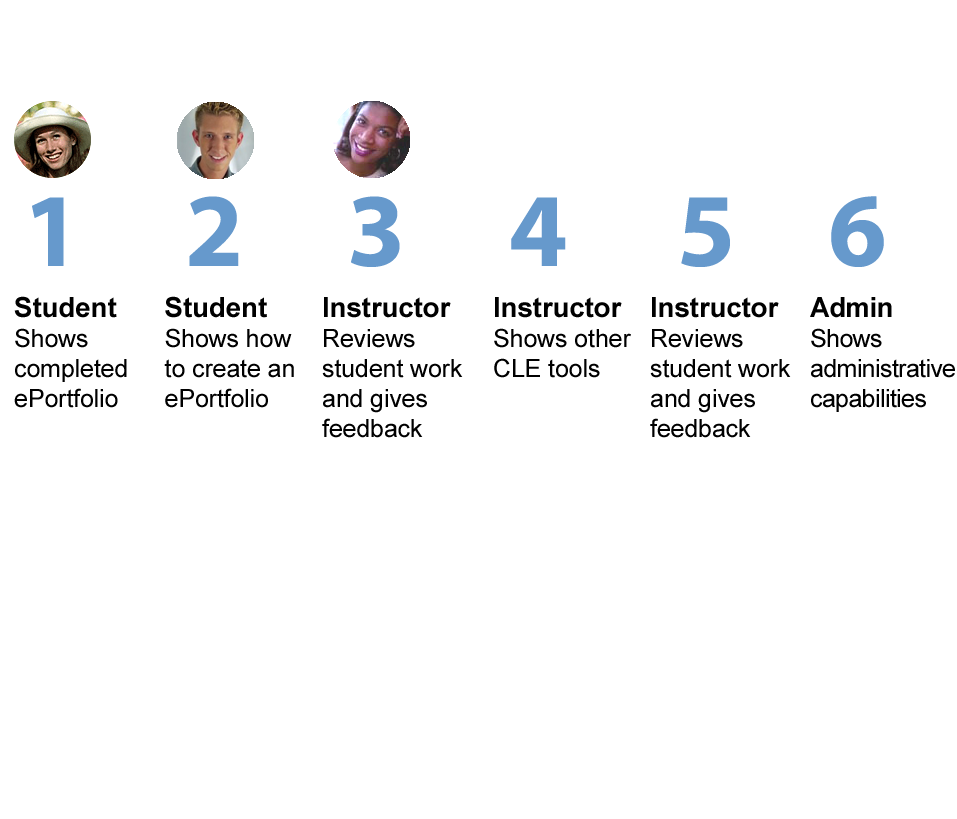
<style>
.page{position:relative;width:957px;height:819px;background:#ffffff}
.page>*{position:absolute;margin:0}
.t1{font:105.6px "Myriad-Bold";letter-spacing:0.39em;color:#6699cc}
.t2{font:25px "ArialMT";letter-spacing:-0.005em;color:#000000}
.t3{font:27.8px "Arial-BoldMT";letter-spacing:-0.005em;color:#000000}
.t4{font:25px "ArialMT";letter-spacing:-0.025em;color:#000000}
.t5{font:27.8px "Arial-BoldMT";letter-spacing:-0.025em;color:#000000}
</style>
<div class="page">
<p class="t1" style="left:32px;top:196px;width:852px;height:71px">1 2 3 4 5 6</p>
<p class="t2" style="left:14px;top:296px;width:113px;height:112px"><span class="t3">Student<br></span>Shows completed ePortfolio</p>
<p class="t2" style="left:164px;top:296px;width:130px;height:112px"><span class="t3">Student<br></span>Shows how to create an ePortfolio</p>
<p class="t2" style="left:322px;top:297px;width:141px;height:141px"><span class="t3">Instructor<br></span>Reviews student work and gives feedback</p>
<p class="t2" style="left:494px;top:297px;width:137px;height:81px"><span class="t3">Instructor<br></span>Shows other CLE tools</p>
<p class="t2" style="left:650px;top:297px;width:141px;height:141px"><span class="t3">Instructor<br></span>Reviews student work and gives feedback</p>
<p class="t4" style="left:810px;top:297px;width:145px;height:115px"><span class="t5">Admin<br></span>Shows administrative capabilities</p>
</div>
